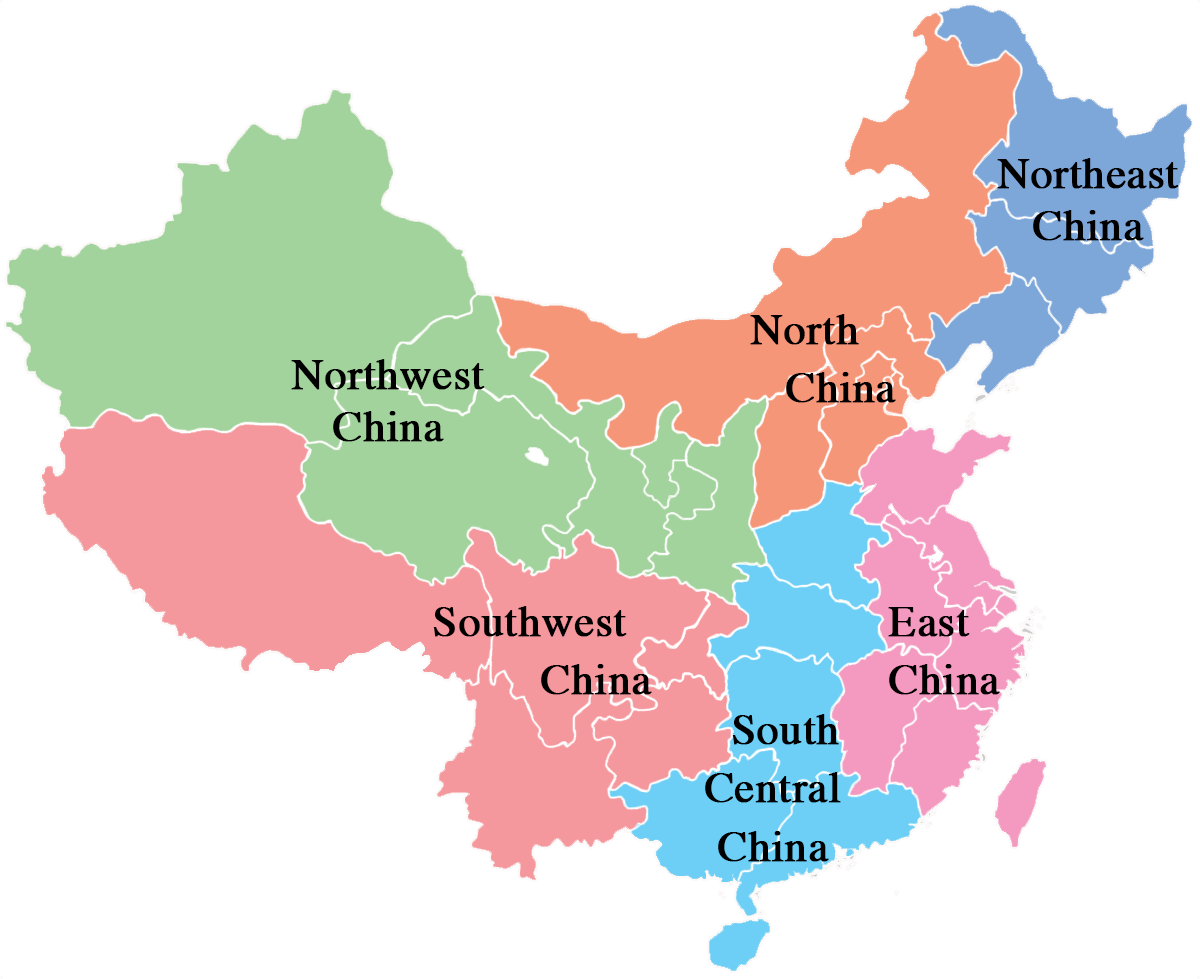
<style>
.page{position:relative;width:1200px;height:979px;background:#ffffff}
.page>*{position:absolute;margin:0}
.t1{font:44px "Times-Roman";color:#000000;font-weight:bold}
</style>
<div class="page">
<p class="t1" style="left:997px;top:158px;width:182px;height:83px;text-align:center">Northeast China</p>
<p class="t1" style="left:750px;top:314px;width:146px;height:89px;text-align:center">North <br>  China</p>
<p class="t1" style="left:291px;top:359px;width:194px;height:83px;text-align:center">Northwest China</p>
<p class="t1" style="left:433px;top:606px;width:219px;height:89px">Southwest  <br>   China</p>
<p class="t1" style="left:888px;top:607px;width:112px;height:88px">East<br>China</p>
<p class="t1" style="left:705px;top:714px;width:136px;height:148px;text-align:center">South<br>Central<br>China</p>
</div>
